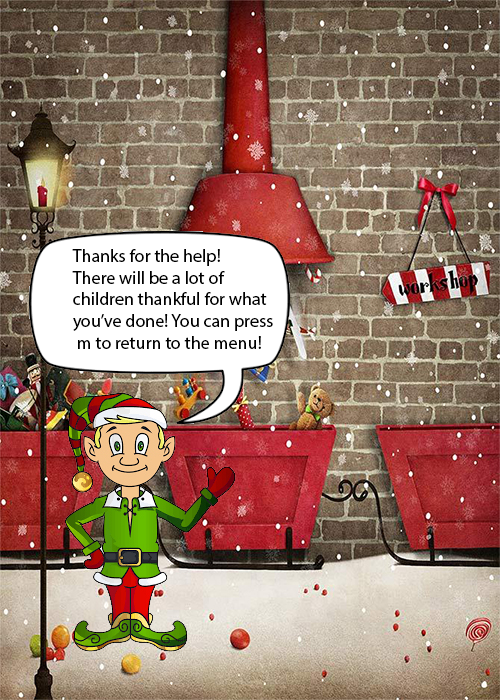
<style>
.page{position:relative;width:500px;height:700px}
.page>*{position:absolute;margin:0}
.t1{font:18px "MyriadPro-Regular";color:#000000}
</style>
<div class="page">
<p class="t1" style="left:72px;top:249px;width:201px;height:100px">Thanks for the help!<br>There will be a lot of <br>children thankful for what <br>you’ve done! You can press<br> m to return to the menu!</p>
</div>
